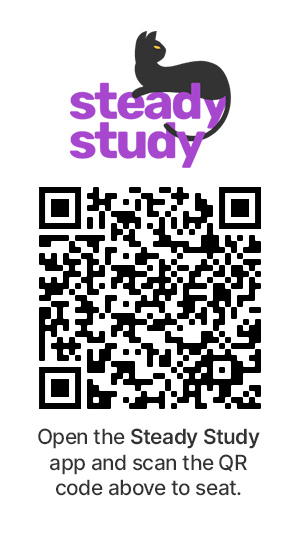
<style>
.page{position:relative;width:300px;height:541px;background:#ffffff}
.page>*{position:absolute;margin:0}
.t1{font:21px "Inter-Medium";letter-spacing:-0.025em;color:#333333}
.t2{font:21px "Inter-SemiBold";letter-spacing:-0.025em;color:#333333}
</style>
<div class="page">
<p class="t1" style="left:38px;top:428px;width:222px;height:68px;text-align:center">Open the <span class="t2">Steady Study</span>  app and scan the QR code above to seat.</p>
</div>
